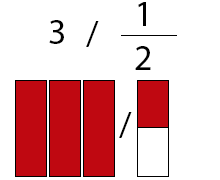
<style>
.page{position:relative;width:220px;height:180px;background:#ffffff}
.page>*{position:absolute;margin:0}
.t1{font:36px "MyriadPro-Regular";color:#000000}
</style>
<div class="page">
<p class="t1" style="left:138px;top:2px;width:8px;height:24px">1</p>
<p class="t1" style="left:49px;top:20px;width:15px;height:24px">3</p>
<p class="t1" style="left:86px;top:21px;width:13px;height:26px">/</p>
<p class="t1" style="left:135px;top:46px;width:16px;height:24px">2v</p>
<p class="t1" style="left:119px;top:112px;width:13px;height:26px">/</p>
</div>
